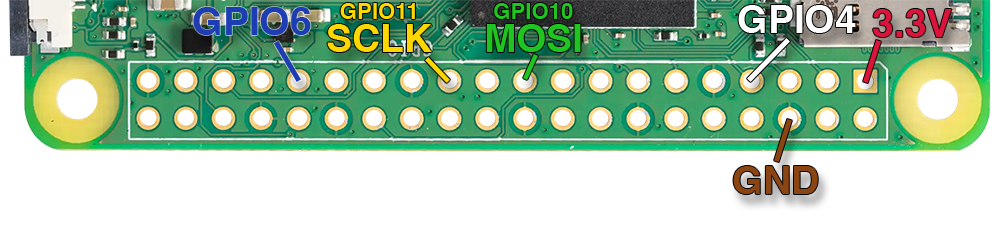
<style>
.page{position:relative;width:1000px;height:250px;background:#ffffff}
.page>*{position:absolute;margin:0}
.t1{font:22.2px/33.3px "Helvetica-Bold";color:#ffd700}
.t2{font:38.9px/33.3px "Helvetica-Bold";color:#ffd700}
.t3{font:22.2px/33.3px "Helvetica-Bold";color:#20c420}
.t4{font:38.9px/33.3px "Helvetica-Bold";color:#20c420}
.t5{font:38.9px "Helvetica-Bold";color:#ffffff}
.t6{font:38.9px "Helvetica-Bold";color:#1e3db4}
.t7{font:38.9px "Helvetica-Bold";color:#dc143c}
.t8{font:38.9px "Helvetica-Bold";color:#8b4513}
</style>
<div class="page">
<p class="t1" style="left:327px;top:3px;width:105px;height:49px;text-align:center">GPIO11<span class="t2"><br>SCLK</span></p>
<p class="t3" style="left:486px;top:3px;width:95px;height:49px;text-align:center">GPIO10<br><span class="t4">MOSI</span></p>
<p class="t5" style="left:738px;top:5px;width:118px;height:28px">GPIO4</p>
<p class="t6" style="left:193px;top:7px;width:118px;height:28px">GPIO6</p>
<p class="t7" style="left:873px;top:9px;width:79px;height:28px">3.3V</p>
<p class="t8" style="left:733px;top:166px;width:85px;height:28px">GND</p>
</div>
